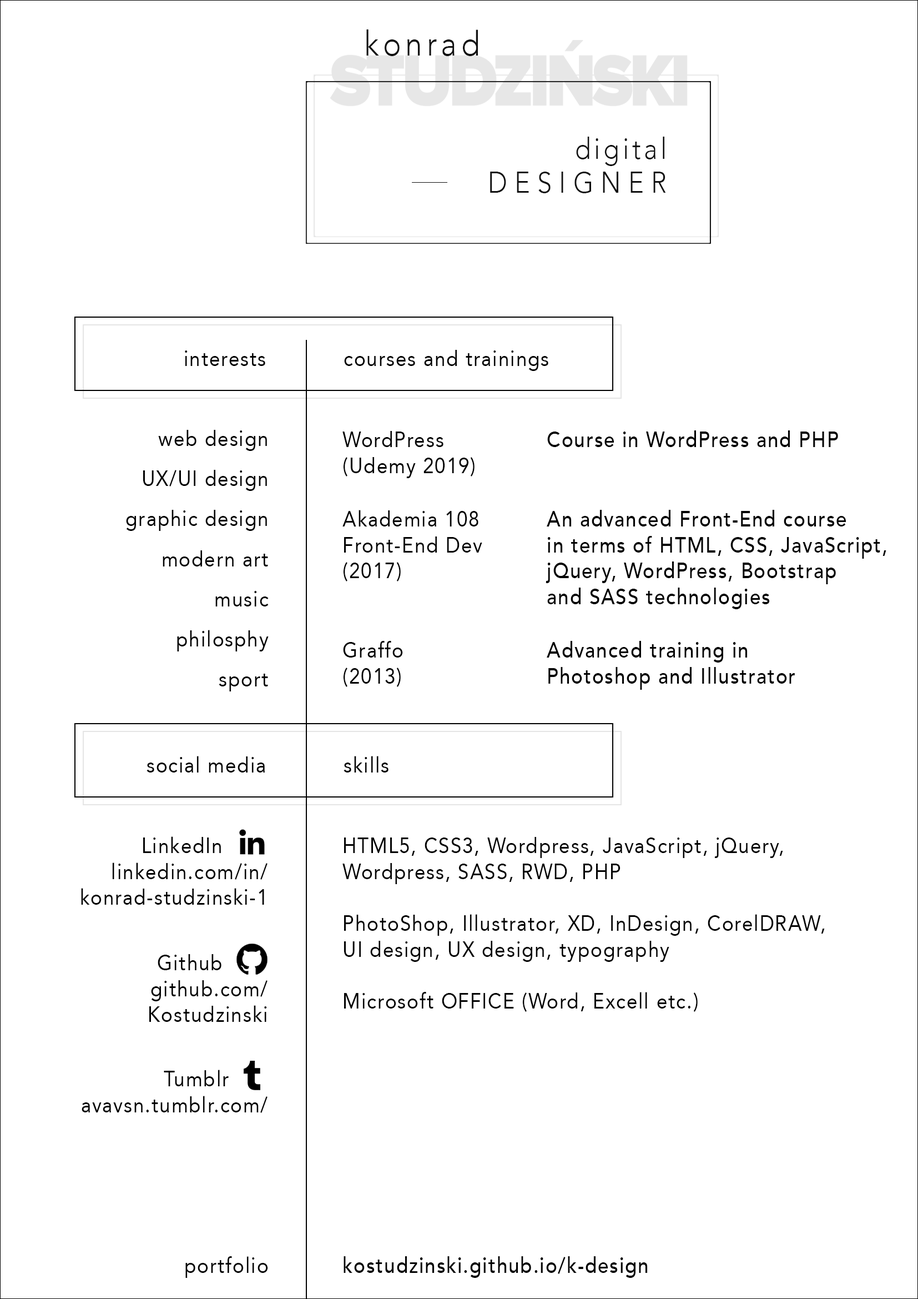
<style>
.page{position:relative;width:918px;height:1299px;background:#ffffff}
.page>*{position:absolute;margin:0}
.t1{font:34.2px "Avenir-Light";letter-spacing:0.14em;color:#101010;scale:0.89 1}
.t2{font:29.3px/34.2px "Avenir-Light";letter-spacing:0.28em;color:#101010;scale:0.89 1}
.t3{font:29.3px/34.2px "Avenir-Light";letter-spacing:0.12em;color:#101010;scale:0.89 1}
.t4{font:21.6px "Avenir-Roman";letter-spacing:0.06em;color:#000000;scale:0.89 1}
.t5{font:21.6px/40.1px "Avenir-Roman";letter-spacing:0.06em;color:#000000;scale:0.89 1}
.t6{font:21.6px "Avenir-Medium";letter-spacing:0.06em;color:#000000;scale:0.89 1}
</style>
<div class="page">
<p class="t1" style="left:366px;top:29px;width:112px;height:27px">konrad</p>
<p class="t2" style="left:490px;top:137px;width:176px;height:56px;text-align:right"><span class="t3">digital<br></span>DESIGNER</p>
<p class="t4" style="left:185px;top:350px;width:80px;height:16px">interests</p>
<p class="t4" style="left:344px;top:350px;width:205px;height:21px">courses and trainings</p>
<p class="t5" style="left:126px;top:430px;width:143px;height:261px;text-align:right">web design<br>UX/UI design<br>graphic design<br>modern art<br>music<br>philosphy<br>sport</p>
<p class="t4" style="left:343px;top:431px;width:132px;height:47px;text-align:justify">WordPress<br>(Udemy 2019)</p>
<p class="t6" style="left:547px;top:430px;width:291px;height:17px">Course in WordPress and PHP</p>
<p class="t4" style="left:343px;top:510px;width:139px;height:71px;text-align:justify">Akademia 108<br>Front-End Dev<br>(2017)</p>
<p class="t6" style="left:546px;top:510px;width:341px;height:99px;text-align:justify">An advanced Front-End course<br>in terms of HTML, CSS, JavaScript,<br>jQuery, WordPress, Bootstrap<br>and SASS technologies</p>
<p class="t4" style="left:343px;top:641px;width:60px;height:46px;text-align:justify">Graffo<br>(2013)</p>
<p class="t6" style="left:547px;top:641px;width:248px;height:49px;text-align:justify">Advanced training in <br>Photoshop and Illustrator</p>
<p class="t4" style="left:147px;top:756px;width:118px;height:16px">social media</p>
<p class="t4" style="left:344px;top:756px;width:45px;height:16px">skills</p>
<p class="t4" style="left:81px;top:836px;width:187px;height:68px;text-align:right">LinkedIn       <br>linkedin.com/in/<br>konrad-studzinski-1</p>
<p class="t4" style="left:343px;top:837px;width:482px;height:175px">HTML5, CSS3, Wordpress, JavaScript, jQuery,<br>Wordpress, SASS, RWD, PHP<br><br>PhotoShop, Illustrator, XD, InDesign, CorelDRAW, <br>UI design, UX design, typography<br><br>Microsoft OFFICE (Word, Excell etc.)</p>
<p class="t4" style="left:149px;top:954px;width:119px;height:68px;text-align:right">Github       <br>github.com/<br>Kostudzinski</p>
<p class="t4" style="left:82px;top:1069px;width:186px;height:44px;text-align:right">Tumblr      <br>avavsn.tumblr.com/</p>
<p class="t4" style="left:185px;top:1256px;width:83px;height:21px">portfolio</p>
<p class="t6" style="left:344px;top:1256px;width:304px;height:21px">kostudzinski.github.io/k-design</p>
</div>
